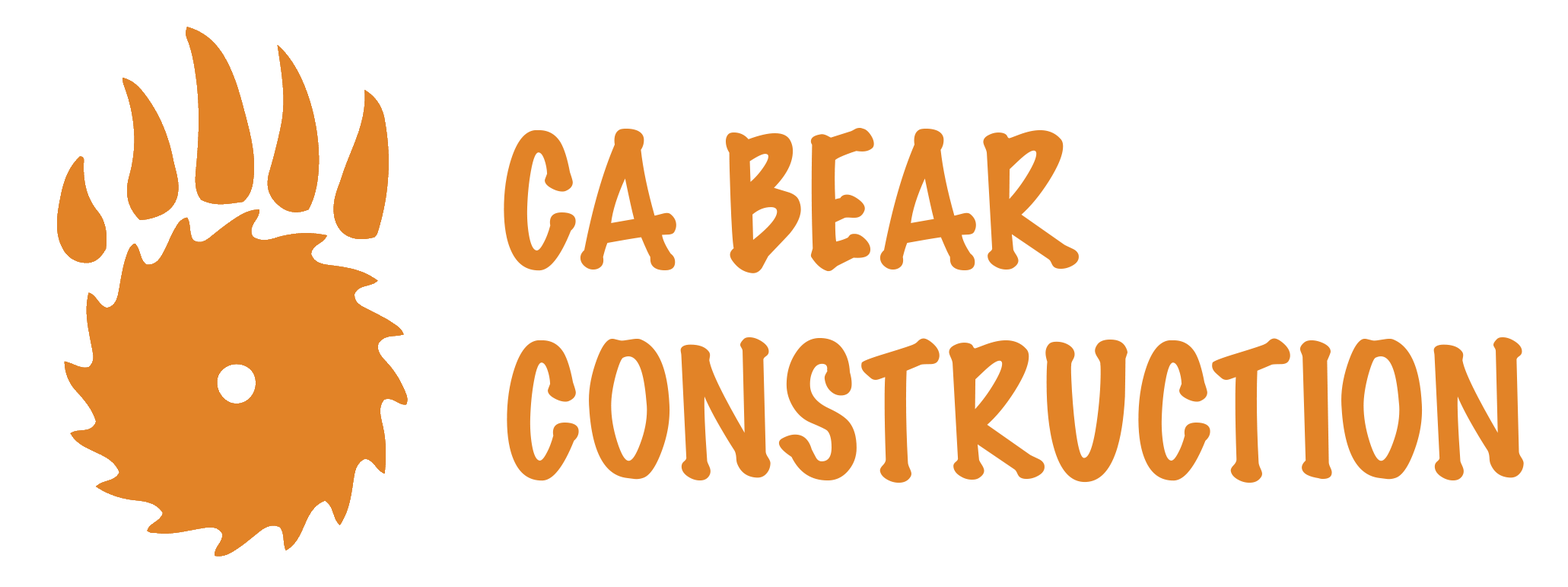
<style>
.page{position:relative;width:1568px;height:587px;background:#ffffff}
.page>*{position:absolute;margin:0}
.t1{font:167.4px "MarkerFelt-Thin";color:#e28327}
</style>
<div class="page">
<p class="t1" style="left:504px;top:128px;width:575px;height:145px">CA BEAR</p>
<p class="t1" style="left:507px;top:337px;width:1017px;height:145px">CONSTRUCTION</p>
</div>
